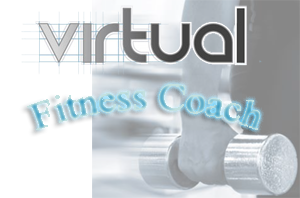
<style>
.page{position:relative;width:300px;height:198px;background:#ffffff}
.page>*{position:absolute;margin:0}
.t1{font:37.6px "TimesNewRomanPSMT"}
</style>
<div class="page">
<p class="t1" style="left:27px;top:84px;width:233px;height:46px">Fitness Coach</p>
</div>
